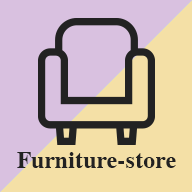
<style>
.page{position:relative;width:192px;height:192px;background:#d9c1e0}
.page>*{position:absolute;margin:0}
.t1{font:23.8px "Dutch801BT-Bold";color:#222222}
</style>
<div class="page">
<p class="t1" style="left:17px;top:152px;width:159px;height:16px">Furniture-store</p>
</div>
